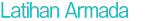
<style>
.page{position:relative;width:145px;height:21px;background:#ffffff}
.page>*{position:absolute;margin:0}
.t1{font:20px "GothicMB101Pro-Regular";letter-spacing:-0.06em;color:#1dbcc0;scale:0.9 1}
</style>
<div class="page">
<p class="t1" style="left:1px;top:2px;width:128px;height:16px">Latihan Armada</p>
</div>
